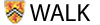
<style>
.page{position:relative;width:100px;height:25px;background:#ffffff}
.page>*{position:absolute;margin:0}
.t1{font:25px "MyriadPro-Regular";color:#000000}
</style>
<div class="page">
<p class="t1" style="left:30px;top:4px;width:61px;height:17px">WALK</p>
</div>
